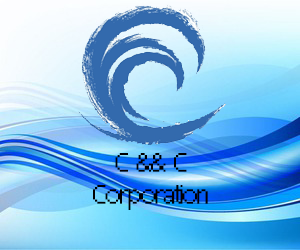
<style>
.page{position:relative;width:300px;height:250px}
.page>*{position:absolute;margin:0}
.t1{font:26.7px "rfrur12";color:#000000}
.t2{font:26.7px "MyriadPro-Regular";color:#000000}
</style>
<div class="page">
<p class="t1" style="left:93px;top:153px;width:115px;height:57px"><span class="t2">    </span>C &amp;&amp; C <br>Corporation</p>
</div>
